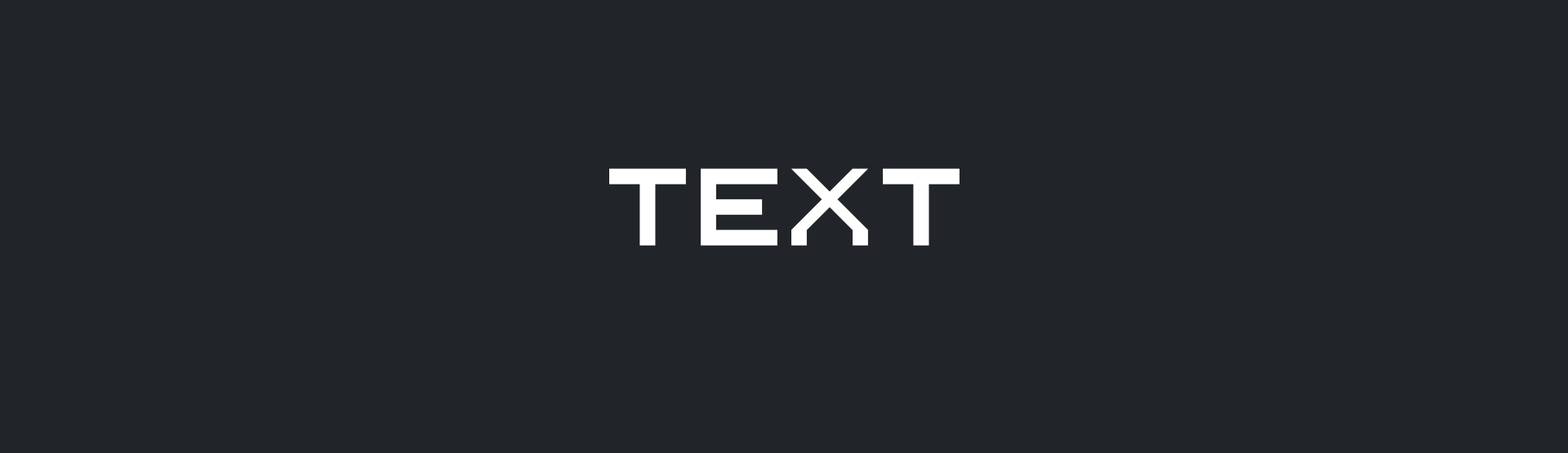
<style>
.page{position:relative;width:1568px;height:453px;background:#212529}
.page>*{position:absolute;margin:0}
.t1{font:122.5px "Grishenko-NBP";color:#ffffff}
</style>
<div class="page">
<p class="t1" style="left:609px;top:168px;width:351px;height:78px">TEXT</p>
</div>
